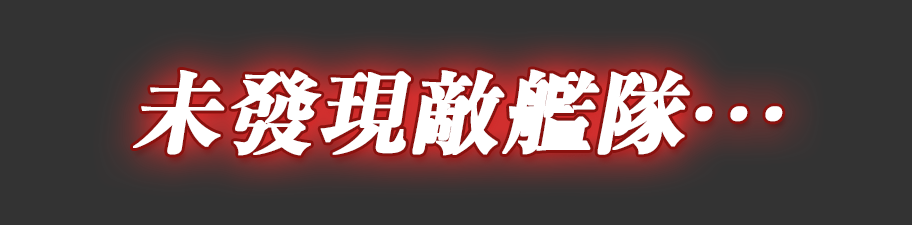
<style>
.page{position:relative;width:912px;height:225px;background:#333333}
.page>*{position:absolute;margin:0}
.t1{font:90px "RyuminPr6N-ExBold";color:#ffffff;font-weight:bold;font-style:italic}
.t2{font:90px "RyuminPr6N-ExBold";letter-spacing:0.1em;color:#ffffff;font-weight:bold;font-style:italic}
</style>
<div class="page">
<p class="t1" style="left:133px;top:69px;width:650px;height:87px">未發現敵艦隊<span class="t2">···</span></p>
</div>
